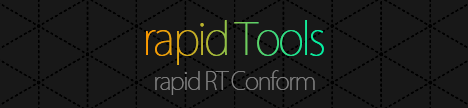
<style>
.page{position:relative;width:468px;height:108px;background:#181818}
.page>*{position:absolute;margin:0}
.t1{font:44.1px "KozGoPr6N-ExtraLight";letter-spacing:-0.06em}
.t2{font:24.1px "KozGoPr6N-ExtraLight";letter-spacing:-0.06em;color:#7f7f7f}
</style>
<div class="page">
<p class="t1" style="left:146px;top:20px;width:178px;height:45px">rapid Tools</p>
<p class="t2" style="left:155px;top:70px;width:160px;height:25px">rapid RT Conform</p>
</div>
